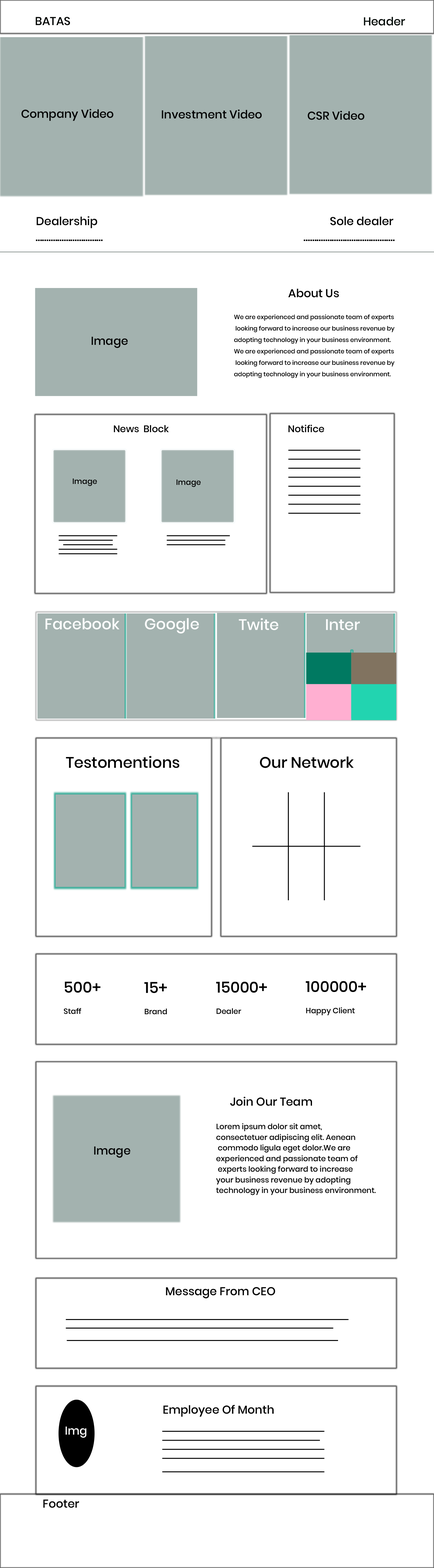
<style>
.page{position:relative;width:434px;height:1568px;background:#ffffff}
.page>*{position:absolute;margin:0}
.t1{font:11.4px "Poppins-Medium";color:#000301}
.t2{font:11.4px "Poppins-Medium";color:#000804}
.t3{font:11.4px "Poppins-Medium";color:#000000}
.t4{font:6.1px/11.4px "Poppins-Medium";color:#000000}
.t5{font:9.5px "Poppins-Medium";color:#000000}
.t6{font:7.6px "Poppins-Medium";color:#000000}
.t7{font:15.2px "Poppins-Medium";color:#fcfdfd}
.t8{font:15.2px "Poppins-Medium";color:#000000}
.t9{font:7.6px/10.6px "Poppins-Medium";color:#000000}
.t10{font:15.2px/10.6px "Poppins-Medium";color:#000000}
.t11{font:11.4px "Poppins-Medium";color:#ffffff}
</style>
<div class="page">
<p class="t1" style="left:36px;top:17px;width:34px;height:8px">BATAS</p>
<p class="t2" style="left:364px;top:17px;width:41px;height:9px">Header</p>
<p class="t3" style="left:21px;top:109px;width:92px;height:12px">Company Video</p>
<p class="t3" style="left:162px;top:110px;width:100px;height:9px">Investment Video</p>
<p class="t3" style="left:307px;top:111px;width:57px;height:9px">CSR Video</p>
<p class="t3" style="left:37px;top:216px;width:60px;height:12px">Dealership</p>
<p class="t3" style="left:330px;top:217px;width:63px;height:8px">Sole dealer</p>
<p class="t3" style="left:36px;top:239px;width:67px;height:2px">...............................</p>
<p class="t3" style="left:304px;top:239px;width:90px;height:2px">..........................................</p>
<p class="t3" style="left:288px;top:289px;width:51px;height:9px">About Us</p>
<p class="t4" style="left:234px;top:314px;width:160px;height:64px">We are experienced and passionate team of experts<br> looking forward to increase our business revenue by <br>adopting technology in your business environment.<br>We are experienced and passionate team of experts<br> looking forward to increase our business revenue by <br>adopting technology in your business environment.</p>
<p class="t3" style="left:91px;top:337px;width:37px;height:11px">Image</p>
<p class="t5" style="left:114px;top:425px;width:55px;height:7px">News  Block</p>
<p class="t5" style="left:288px;top:425px;width:36px;height:7px">Notifice</p>
<p class="t6" style="left:73px;top:479px;width:24px;height:7px">Image</p>
<p class="t6" style="left:176px;top:479px;width:25px;height:8px">Image</p>
<p class="t7" style="left:45px;top:618px;width:74px;height:12px">Facebook</p>
<p class="t7" style="left:145px;top:618px;width:54px;height:15px">Google</p>
<p class="t7" style="left:238px;top:618px;width:40px;height:12px">Twite</p>
<p class="t7" style="left:326px;top:619px;width:34px;height:11px">Inter</p>
<p class="t8" style="left:66px;top:756px;width:113px;height:12px">Testomentions</p>
<p class="t8" style="left:260px;top:756px;width:93px;height:12px">Our Network</p>
<p class="t9" style="left:64px;top:982px;width:36px;height:32px"><span class="t10">500+<br><br></span>Staff</p>
<p class="t9" style="left:144px;top:982px;width:23px;height:33px"><span class="t10">15+<br><br></span>Brand</p>
<p class="t10" style="left:216px;top:982px;width:51px;height:32px">15000+<br><br><span class="t9">Dealer</span></p>
<p class="t9" style="left:305px;top:981px;width:61px;height:34px"><span class="t10">100000+<br><br></span>Happy Client</p>
<p class="t3" style="left:230px;top:1097px;width:82px;height:9px">Join Our Team</p>
<p class="t9" style="left:216px;top:1123px;width:160px;height:72px">Lorem ipsum dolor sit amet, <br>consectetuer adipiscing elit. Aenean<br> commodo ligula eget dolor.We are <br>experienced and passionate team of<br> experts looking forward to increase <br>your business revenue by adopting <br>technology in your business environment.</p>
<p class="t3" style="left:94px;top:1146px;width:36px;height:12px">Image</p>
<p class="t3" style="left:166px;top:1287px;width:109px;height:11px">Message From CEO</p>
<p class="t3" style="left:163px;top:1405px;width:111px;height:12px">Employee Of Month</p>
<p class="t11" style="left:65px;top:1426px;width:21px;height:12px">Img</p>
<p class="t3" style="left:43px;top:1499px;width:36px;height:9px">Footer</p>
</div>
